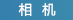
<style>
.page{position:relative;width:73px;height:20px}
.page>*{position:absolute;margin:0}
.t1{font:14px "LiHeiPro";color:#ffffff}
</style>
<div class="page">
<p class="t1" style="left:18px;top:3px;width:38px;height:14px">相  机</p>
</div>
